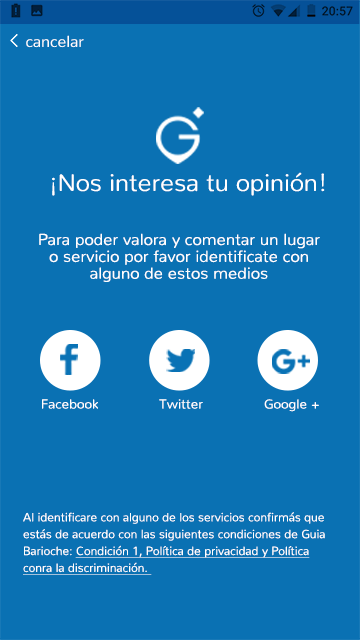
<style>
.page{position:relative;width:360px;height:640px;background:#0a71b3}
.page>*{position:absolute;margin:0}
.t1{font:15.9px "Nunito-Regular";color:#ffffff}
.t2{font:24px "Nunito-Light";color:#ffffff;scale:1.04 1}
.t3{font:16px/16.9px "Nunito-Light";color:#ffffff;scale:1.04 1}
.t4{font:13.1px "Nunito-Light";color:#ffffff;scale:1.04 1}
.t5{font:12px/16.9px "Nunito-Light";color:#ffffff}
.t6{font:12px/16.9px "Nunito-Light";color:#ffffff;text-decoration:underline}
</style>
<div class="page">
<p class="t1" style="left:26px;top:35px;width:58px;height:13px">cancelar</p>
<p class="t2" style="left:52px;top:172px;width:273px;height:24px">¡Nos interesa tu opinión!</p>
<p class="t3" style="left:39px;top:233px;width:281px;height:49px;text-align:center">Para poder valora y comentar un lugar<br>o servicio por favor identificate con<br>alguno de estos medios</p>
<p class="t4" style="left:42px;top:399px;width:56px;height:10px">Facebook</p>
<p class="t4" style="left:159px;top:399px;width:44px;height:10px">Twitter</p>
<p class="t4" style="left:264px;top:399px;width:55px;height:13px">Google +</p>
<p class="t5" style="left:23px;top:512px;width:302px;height:63px">Al identificare con alguno de los servicios confirmás que estás de acuerdo con las siguientes condiciones de Guia Barioche: <span class="t6">Condición 1, Política de privacidad y Política conra la discriminación.</span></p>
</div>
